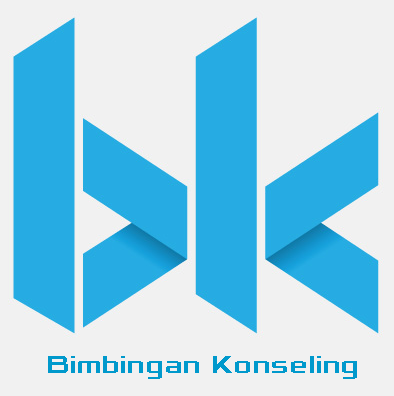
<style>
.page{position:relative;width:394px;height:396px;background:#f1f1f1}
.page>*{position:absolute;margin:0}
.t1{font:25.6px "Xolonium-Bold";letter-spacing:-0.003em;color:#0099cc}
</style>
<div class="page">
<p class="t1" style="left:48px;top:356px;width:309px;height:23px">Bimbingan Konseling</p>
</div>
